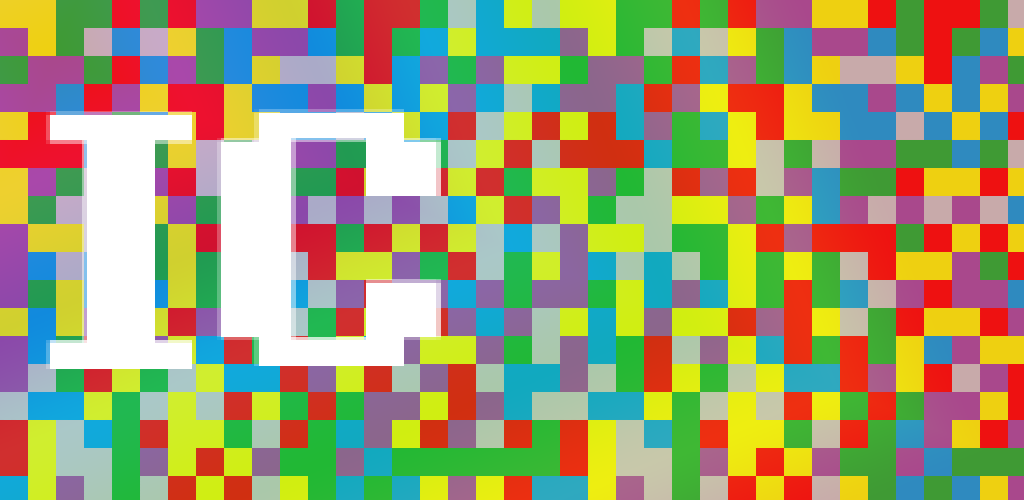
<style>
.page{position:relative;width:1024px;height:500px}
.page>*{position:absolute;margin:0}
.t1{font:362.6px "Fixedsys";color:#ffffff;scale:1.26 1}
.t2{font:361.3px "Fixedsys";color:#ffffff;scale:1.29 1}
</style>
<div class="page">
<p class="t1" style="left:46px;top:111px;width:146px;height:258px">I</p>
<p class="t2" style="left:217px;top:109px;width:224px;height:257px">C</p>
</div>
